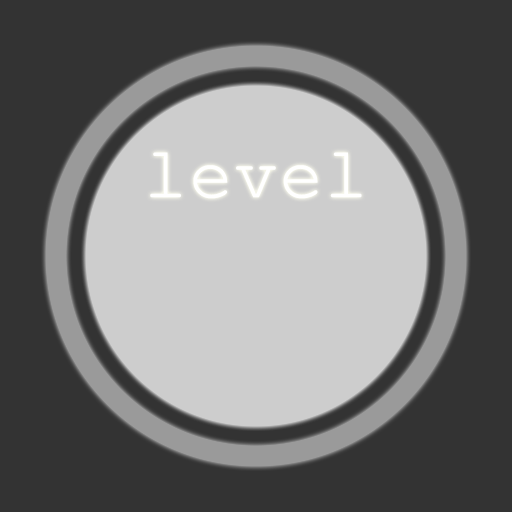
<style>
.page{position:relative;width:512px;height:512px;background:#333333}
.page>*{position:absolute;margin:0}
.t1{font:72px "CourierNewPSMT";color:#ffffff;font-weight:bold}
</style>
<div class="page">
<p class="t1" style="left:150px;top:152px;width:212px;height:47px">level</p>
</div>
